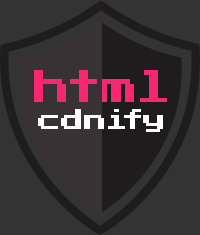
<style>
.page{position:relative;width:200px;height:235px;background:#333333}
.page>*{position:absolute;margin:0}
.t1{font:36.7px "PressStart2P-Regular";color:#f92672}
.t2{font:23.3px "PressStart2P-Regular";color:#ffffff}
</style>
<div class="page">
<p class="t1" style="left:34px;top:70px;width:133px;height:32px">html</p>
<p class="t2" style="left:38px;top:109px;width:125px;height:23px">cdnify</p>
</div>
